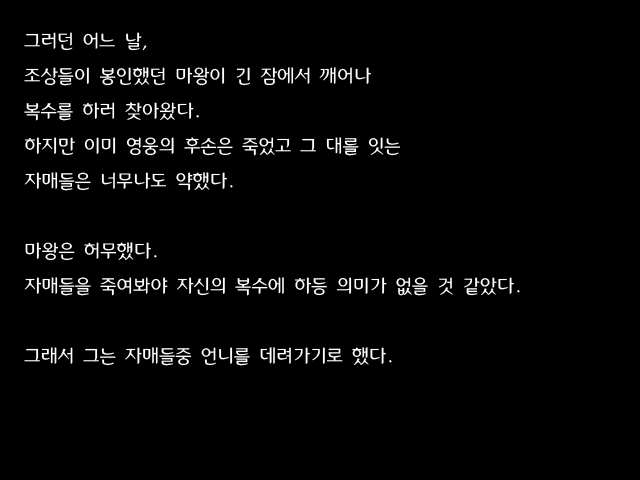
<style>
.page{position:relative;width:640px;height:480px;background:#000000}
.page>*{position:absolute;margin:0}
.t1{font:20px "HUWestsky130";color:#ffffff}
</style>
<div class="page">
<p class="t1" style="left:24px;top:32px;width:496px;height:334px">그러던 어느 날, <br>조상들이 봉인했던 마왕이 긴 잠에서 깨어나 <br>복수를 하러 찾아왔다.<br>하지만 이미 영웅의 후손은 죽었고 그 대를 잇는 <br>자매들은 너무나도 약했다.<br><br>마왕은 허무했다.<br>자매들을 죽여봐야 자신의 복수에 하등 의미가 없을 것 같았다. <br><br>그래서 그는 자매들중 언니를 데려가기로 했다.</p>
</div>
